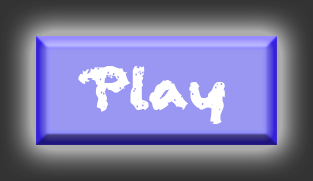
<style>
.page{position:relative;width:313px;height:181px;background:#9997f1}
.page>*{position:absolute;margin:0}
.t1{font:55px "squeakychalksound";color:#ffffff}
</style>
<div class="page">
<p class="t1" style="left:78px;top:66px;width:147px;height:58px">Play</p>
</div>
